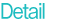
<style>
.page{position:relative;width:81px;height:21px;background:#ffffff}
.page>*{position:absolute;margin:0}
.t1{font:20px "GothicMB101Pro-Regular";letter-spacing:-0.06em;color:#1dbcc0;scale:0.9 1}
</style>
<div class="page">
<p class="t1" style="left:1px;top:3px;width:44px;height:16px">Detail</p>
</div>
